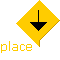
<style>
.page{position:relative;width:60px;height:60px;background:#ffffff}
.page>*{position:absolute;margin:0}
.t1{font:12px "Verdana";color:#ffcc00}
</style>
<div class="page">
<p class="t1" style="left:1px;top:41px;width:31px;height:12px">place</p>
</div>
